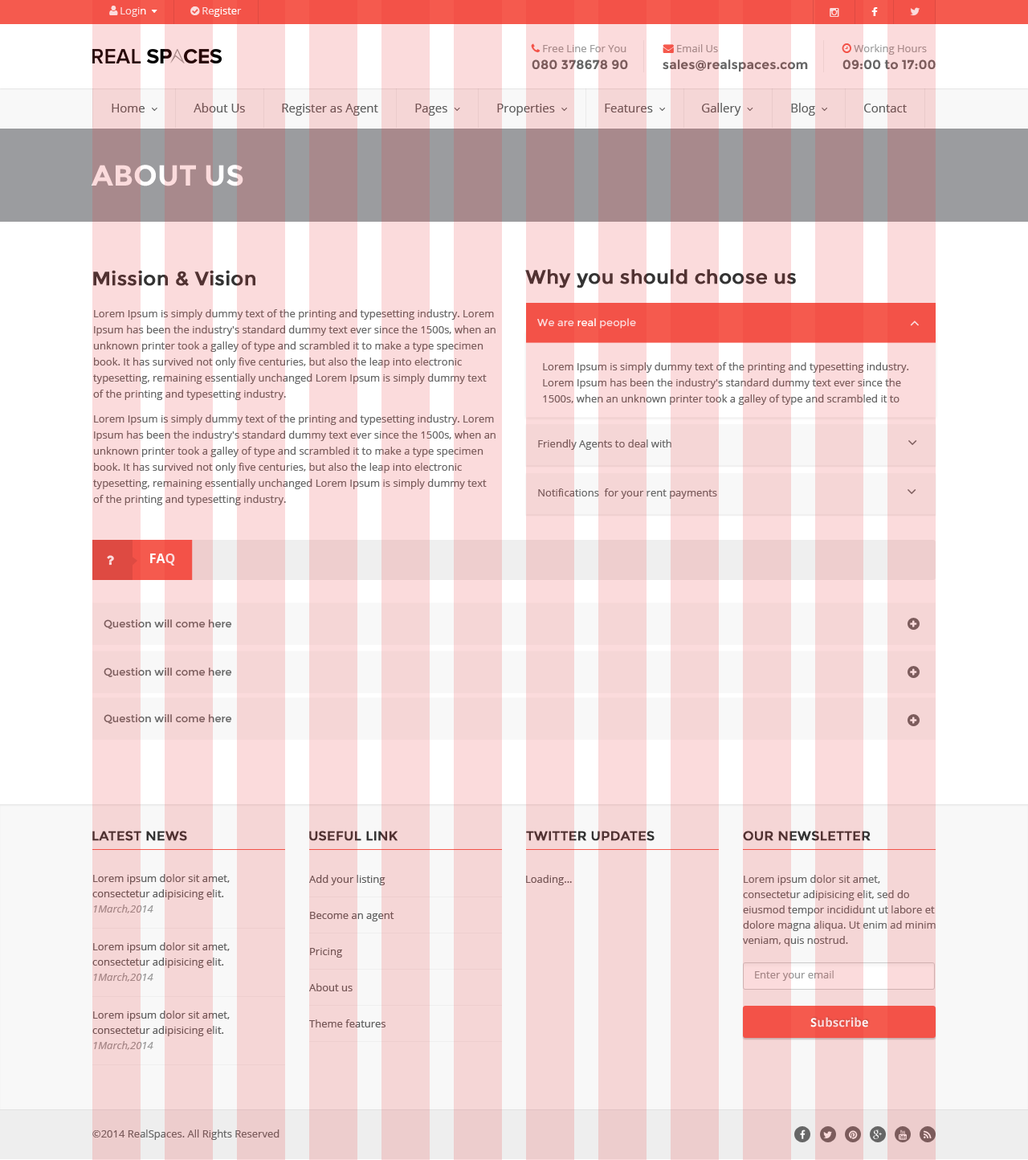
<style>
.page{position:relative;width:1028px;height:1160px;background:#f5d6d6}
.page>*{position:absolute;margin:0}
.t1{font:12.9px "Montserrat-Bold";color:#666666}
.t2{font:12px "OpenSans";color:#5e5e5e}
.t3{font:28.9px "Montserrat-Bold";text-transform:uppercase}
.t4{font:19.3px "Montserrat-Regular";color:#513232;font-weight:bold}
.t5{font:10.4px/16.1px "OpenSans";color:#666666}
.t6{font:10.4px "Montserrat-Regular";color:#fbdbdc}
.t7{font:12.9px "OpenSans-Bold"}
.t8{font:10.4px "Montserrat-Regular";color:#666666}
.t9{font:12.9px "Montserrat-Regular";color:#513232;font-weight:bold}
.t10{font:10.4px/15.3px "OpenSans";color:#5e5e5e}
.t11{font:10.4px/15.3px "OpenSans-Italic";color:#999999}
.t12{font:10.4px/36.1px "OpenSans";color:#5e5e5e}
.t13{font:10.4px "OpenSans";color:#5e5e5e}
.t14{font:10.4px/15.3px "OpenSans";color:#666666}
.t15{font:10.4px "OpenSans";color:#999999}
.t16{font:12px "OpenSans-Bold";color:#fbdbdc}
.t17{font:10.4px "OpenSans";color:#666666}
</style>
<div class="page">
<p class="t1" style="left:532px;top:59px;width:96px;height:11px">080 378678 90</p>
<p class="t1" style="left:663px;top:59px;width:145px;height:12px">sales@realspaces.com</p>
<p class="t1" style="left:843px;top:59px;width:93px;height:11px">09:00 to 17:00</p>
<p class="t2" style="left:194px;top:103px;width:51px;height:9px">About Us</p>
<p class="t2" style="left:282px;top:104px;width:96px;height:12px">Register as Agent</p>
<p class="t2" style="left:864px;top:104px;width:43px;height:8px">Contact</p>
<p class="t3" style="left:91px;top:165px;width:152px;height:21px">about us</p>
<p class="t4" style="left:93px;top:270px;width:162px;height:16px">Mission &amp; Vision</p>
<p class="t4" style="left:525px;top:269px;width:271px;height:19px">Why you should choose us</p>
<p class="t5" style="left:93px;top:309px;width:403px;height:91px">Lorem Ipsum is simply dummy text of the printing and typesetting industry. Lorem Ipsum has been the industry's standard dummy text ever since the 1500s, when an unknown printer took a galley of type and scrambled it to make a type specimen book. It has survived not only five centuries, but also the leap into electronic typesetting, remaining essentially unchanged Lorem Ipsum is simply dummy text of the printing and typesetting industry.</p>
<p class="t6" style="left:537px;top:318px;width:99px;height:11px">We are real people</p>
<p class="t5" style="left:543px;top:362px;width:366px;height:43px">Lorem Ipsum is simply dummy text of the printing and typesetting industry. Lorem Ipsum has been the industry's standard dummy text ever since the 1500s, when an unknown printer took a galley of type and scrambled it to make a type specimen book.</p>
<p class="t5" style="left:93px;top:414px;width:403px;height:91px">Lorem Ipsum is simply dummy text of the printing and typesetting industry. Lorem Ipsum has been the industry's standard dummy text ever since the 1500s, when an unknown printer took a galley of type and scrambled it to make a type specimen book. It has survived not only five centuries, but also the leap into electronic typesetting, remaining essentially unchanged Lorem Ipsum is simply dummy text of the printing and typesetting industry.</p>
<p class="t7" style="left:150px;top:553px;width:25px;height:12px">FAQ</p>
<p class="t8" style="left:104px;top:619px;width:128px;height:10px">Question will come here</p>
<p class="t8" style="left:104px;top:667px;width:128px;height:10px">Question will come here</p>
<p class="t8" style="left:104px;top:714px;width:128px;height:10px">Question will come here</p>
<p class="t9" style="left:92px;top:831px;width:95px;height:10px">LATEST NEWS</p>
<p class="t9" style="left:309px;top:831px;width:89px;height:10px">USEFUL LINK</p>
<p class="t9" style="left:526px;top:831px;width:129px;height:10px">TWITTER UPDATES</p>
<p class="t9" style="left:743px;top:831px;width:128px;height:10px">OUR NEWSLETTER</p>
<p class="t10" style="left:92px;top:874px;width:138px;height:39px">Lorem ipsum dolor sit amet, consectetur adipisicing elit.<br><span class="t11">1March,2014</span></p>
<p class="t12" style="left:309px;top:875px;width:85px;height:152px">Add your listing<br>Become an agent<br>Pricing<br>About us<br>Theme features</p>
<p class="t13" style="left:526px;top:875px;width:46px;height:10px">Loading...</p>
<p class="t14" style="left:743px;top:875px;width:193px;height:71px">Lorem ipsum dolor sit amet, consectetur adipisicing elit, sed do eiusmod tempor incididunt ut labore et dolore magna aliqua. Ut enim ad minim veniam, quis nostrud.</p>
<p class="t10" style="left:92px;top:942px;width:138px;height:40px">Lorem ipsum dolor sit amet, consectetur adipisicing elit.<br><span class="t11">1March,2014</span></p>
<p class="t15" style="left:755px;top:970px;width:79px;height:11px">Enter your email</p>
<p class="t10" style="left:92px;top:1010px;width:138px;height:40px">Lorem ipsum dolor sit amet, consectetur adipisicing elit.<br><span class="t11">1March,2014</span></p>
<p class="t16" style="left:810px;top:1017px;width:58px;height:10px">Subscribe</p>
<p class="t17" style="left:92px;top:1129px;width:188px;height:11px">©2014 RealSpaces. All Rights Reserved</p>
</div>
